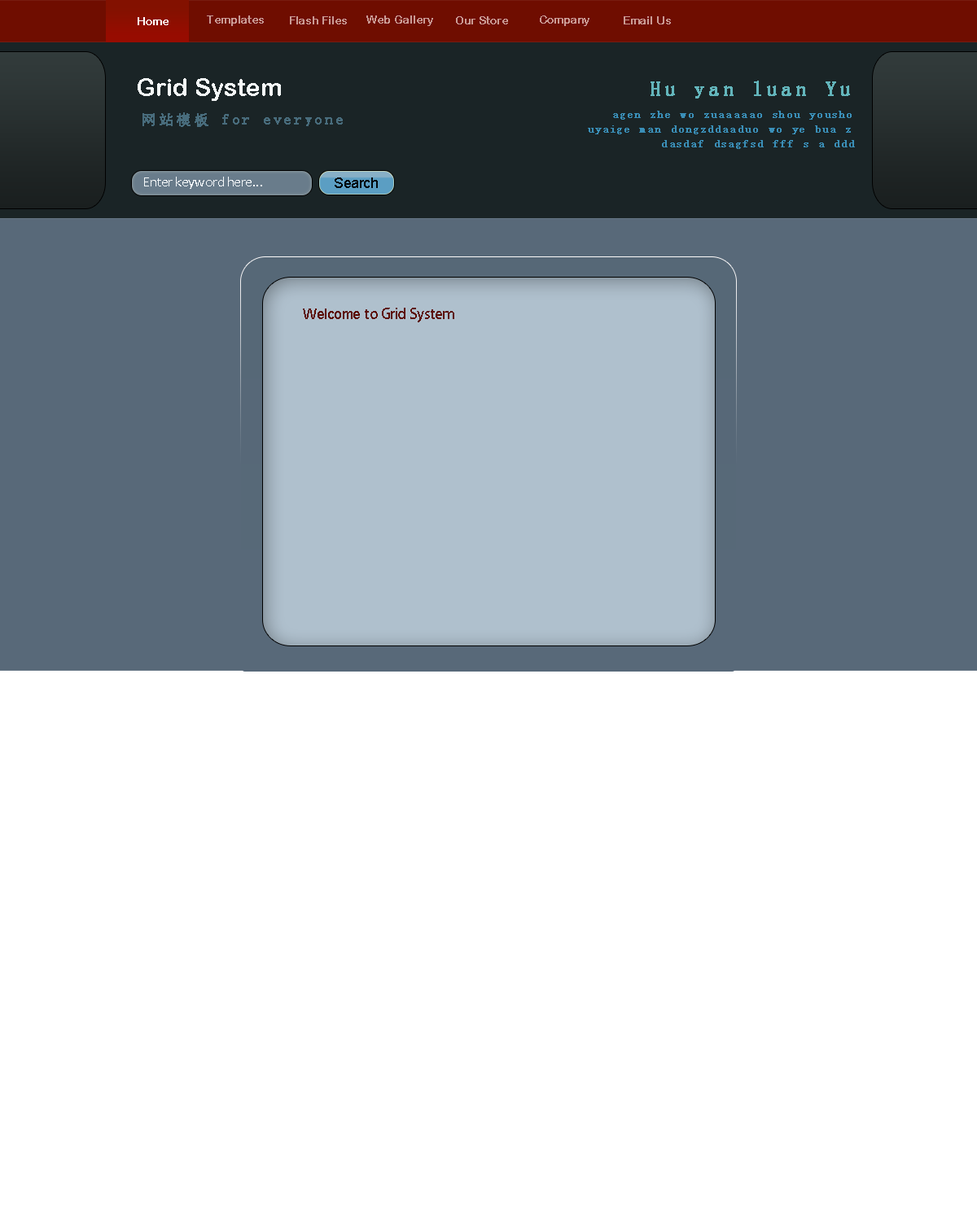
<style>
.page{position:relative;width:977px;height:1221px;background:#ffffff}
.page>*{position:absolute;margin:0}
.t1{font:11.4px "ArialRoundedMTBold";color:#ffffff}
.t2{font:11.4px "ArialRoundedMTBold";color:#ca9b95}
.t3{font:24.4px "ArialRoundedMTBold";color:#f5f9f9}
.t4{font:21.2px "SimSun";letter-spacing:0.15em;color:#63b5bb;font-weight:bold}
.t5{font:14.7px "SimSun";letter-spacing:0.15em;color:#486c7c;font-weight:bold}
.t6{font:11.4px/14.7px "SimSun";letter-spacing:0.15em;color:#3a8fb8;font-weight:bold}
.t7{font:14.7px "Calibri";letter-spacing:-0.025em;color:#f5f9fb}
.t8{font:14.7px "ArialMT";letter-spacing:-0.025em;color:#00070b}
.t9{font:14.7px "AdobeHeitiStd-Regular";letter-spacing:-0.025em;color:#5b0b01}
.t10{font:14.7px "ArialMT";letter-spacing:-0.025em;color:#5b0b01}
</style>
<div class="page">
<p class="t1" style="left:138px;top:17px;width:30px;height:8px">Home</p>
<p class="t2" style="left:207px;top:15px;width:57px;height:11px">Templates</p>
<p class="t2" style="left:290px;top:16px;width:57px;height:8px">Flash Files</p>
<p class="t2" style="left:366px;top:15px;width:67px;height:11px">Web Gallery</p>
<p class="t2" style="left:456px;top:16px;width:52px;height:8px">Our Store</p>
<p class="t2" style="left:540px;top:15px;width:49px;height:11px">Company</p>
<p class="t2" style="left:623px;top:16px;width:48px;height:8px">Email Us</p>
<p class="t3" style="left:138px;top:78px;width:143px;height:23px">Grid System</p>
<p class="t4" style="left:650px;top:81px;width:200px;height:17px">Hu yan luan Yu</p>
<p class="t5" style="left:142px;top:112px;width:66px;height:15px">网站模板</p>
<p class="t5" style="left:222px;top:114px;width:121px;height:12px">for everyone</p>
<p class="t6" style="left:588px;top:111px;width:267px;height:38px">agen zhe wo zuaaaaao shou yousho<br>uyaige man dongzddaaduo wo ye bua z <br>         dasdaf dsagfsd fff s a ddd</p>
<p class="t7" style="left:144px;top:177px;width:118px;height:12px">Enter keyword here...</p>
<p class="t8" style="left:335px;top:177px;width:43px;height:11px">Search</p>
<p class="t9" style="left:303px;top:308px;width:151px;height:14px"><span class="t10">Welcome </span>to Grid System</p>
</div>
